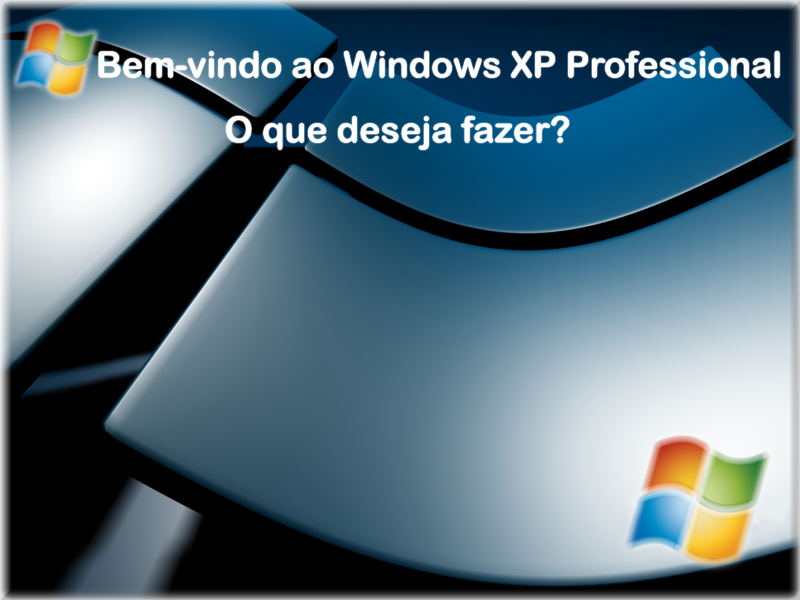
<style>
.page{position:relative;width:800px;height:600px}
.page>*{position:absolute;margin:0}
.t1{font:36px "ArialRoundedMTBold";color:#ffffff}
</style>
<div class="page">
<p class="t1" style="left:98px;top:51px;width:682px;height:27px">Bem-vindo ao Windows XP Professional</p>
<p class="t1" style="left:226px;top:116px;width:343px;height:34px">O que deseja fazer?</p>
</div>
